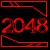
<style>
.page{position:relative;width:50px;height:50px;background:#000000}
.page>*{position:absolute;margin:0}
.t1{font:16.7px "ABitEmpty";color:#ff0000}
</style>
<div class="page">
<p class="t1" style="left:1px;top:18px;width:47px;height:15px">2048</p>
</div>
